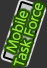
<style>
.page{position:relative;width:47px;height:68px;background:#333333}
.page>*{position:absolute;margin:0}
.t1{font:12px/12px "UDShinGoPro-Light";color:#98e241;font-weight:bold}
</style>
<div class="page">
<p class="t1" style="left:6px;top:3px;width:37px;height:63px;text-align:center;rotate:-72deg">Mobile<br>Task Force</p>
</div>
